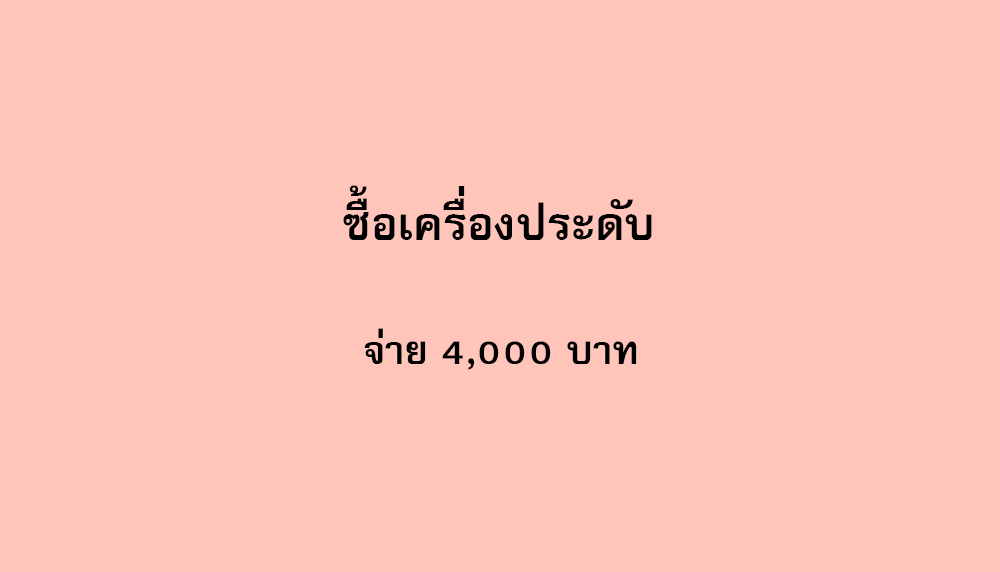
<style>
.page{position:relative;width:1000px;height:572px;background:#ffc4ba}
.page>*{position:absolute;margin:0}
.t1{font:64px "FreesiaUPCBold";color:#000000}
.t2{font:56px "FreesiaUPCBold";color:#000000}
</style>
<div class="page">
<p class="t1" style="left:343px;top:185px;width:309px;height:55px">ซื้อเครื่องประดับ</p>
<p class="t2" style="left:364px;top:328px;width:273px;height:42px">จ่าย 4,000 บาท</p>
</div>
